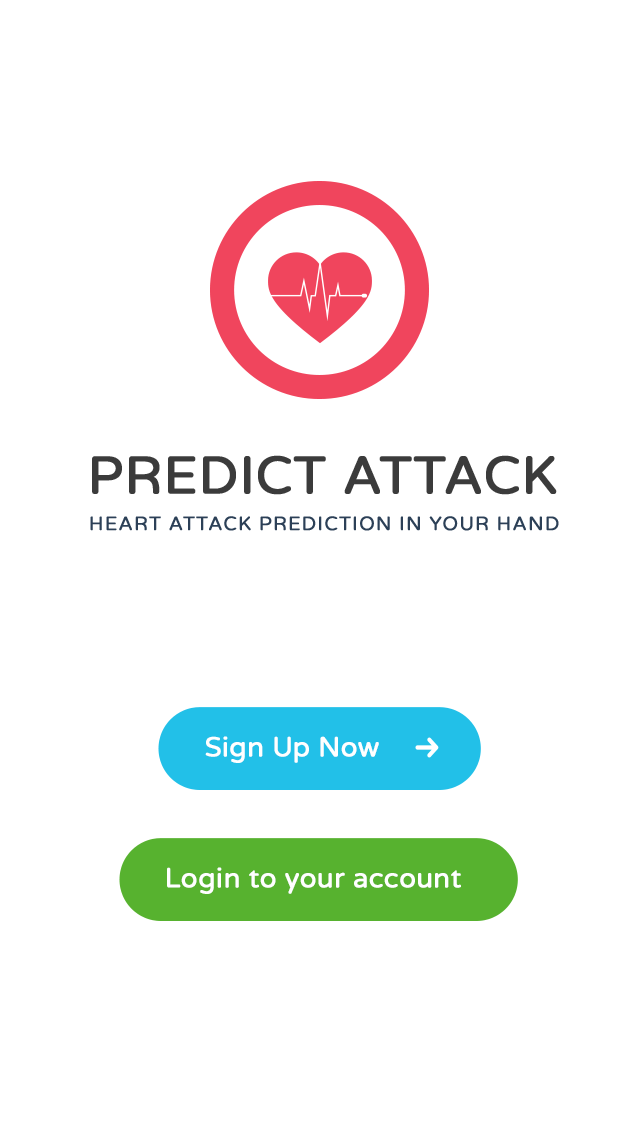
<style>
.page{position:relative;width:640px;height:1136px;background:#ffffff}
.page>*{position:absolute;margin:0}
.t1{font:52.6px "VarelaRound-Regular";color:#3b3b3b;font-weight:bold}
.t2{font:19px "VarelaRound-Regular";letter-spacing:0.05em;color:#2c4057;font-weight:bold}
.t3{font:27.1px "VarelaRound";color:#ffffff;font-weight:bold}
</style>
<div class="page">
<p class="t1" style="left:92px;top:455px;width:465px;height:40px">PREDICT ATTACK</p>
<p class="t2" style="left:90px;top:516px;width:469px;height:15px">HEART ATTACK PREDICTION IN YOUR HAND</p>
<p class="t3" style="left:205px;top:736px;width:174px;height:27px">Sign Up Now</p>
<p class="t3" style="left:167px;top:867px;width:294px;height:27px">Login to your account</p>
</div>
